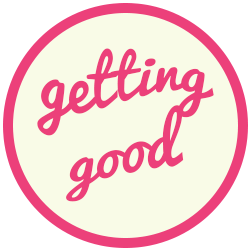
<style>
.page{position:relative;width:250px;height:250px;background:#f9fbe7}
.page>*{position:absolute;margin:0}
.t1{font:60px "Pacifico-Regular";color:#ec407a}
</style>
<div class="page">
<p class="t1" style="left:37px;top:48px;width:177px;height:154px;text-align:center">getting<br>good</p>
</div>
